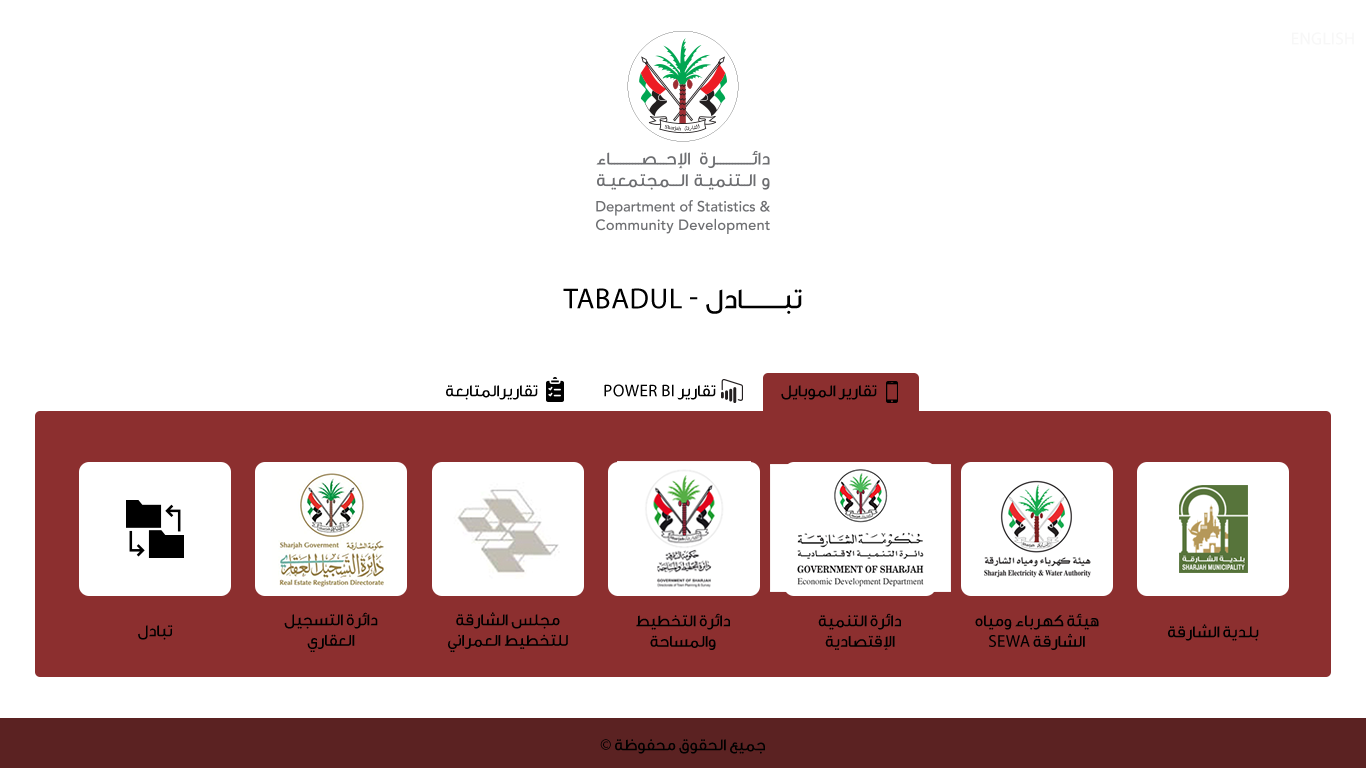
<style>
.page{position:relative;width:1366px;height:768px;background:#ffffff}
.page>*{position:absolute;margin:0}
.t1{font:17px "MyriadPro-Regular";color:#f7f7f7;text-transform:uppercase}
.t2{font:29.1px "Sharjah-Medium";color:#000000;text-transform:uppercase}
.t3{font:29.1px "MyriadPro-Regular";color:#000000;text-transform:uppercase}
.t4{font:17px "Sharjah-Medium";color:#000000;text-transform:uppercase}
.t5{font:17px "MyriadPro-Regular";color:#000000;text-transform:uppercase}
</style>
<div class="page">
<p class="t1" style="left:1292px;top:32px;width:62px;height:13px">english</p>
<p class="t2" style="left:563px;top:288px;width:239px;height:26px"><span class="t3">Tabadul - </span>تبــــــــادل</p>
<p class="t4" style="left:446px;top:385px;width:92px;height:15px">تقاريرالمتابعة</p>
<p class="t5" style="left:604px;top:384px;width:112px;height:16px"><span class="t4">تقارير </span>Power BI</p>
<p class="t4" style="left:781px;top:385px;width:96px;height:15px">تقارير الموبايل</p>
<p class="t4" style="left:284px;top:612px;width:94px;height:40px;text-align:center">دائرة التسجيل<br>العقاري</p>
<p class="t4" style="left:448px;top:612px;width:120px;height:41px;text-align:center">مجلس الشارقة<br>للتخطيط العمراني</p>
<p class="t4" style="left:636px;top:613px;width:94px;height:37px;text-align:center">دائرة التخطيط<br>والمساحة</p>
<p class="t4" style="left:818px;top:613px;width:83px;height:37px;text-align:center">دائرة التنمية<br>الإقتصادية</p>
<p class="t4" style="left:975px;top:613px;width:124px;height:37px;text-align:center">هيئة كهرباء ومياه<br>الشارقة <span class="t5">SEWA</span></p>
<p class="t4" style="left:138px;top:625px;width:35px;height:15px">تبادل</p>
<p class="t4" style="left:1168px;top:624px;width:91px;height:17px">بلدية الشارقة</p>
<p class="t4" style="left:600px;top:739px;width:165px;height:15px">جميع الحقوق محفوظة <span class="t5">©</span></p>
</div>
